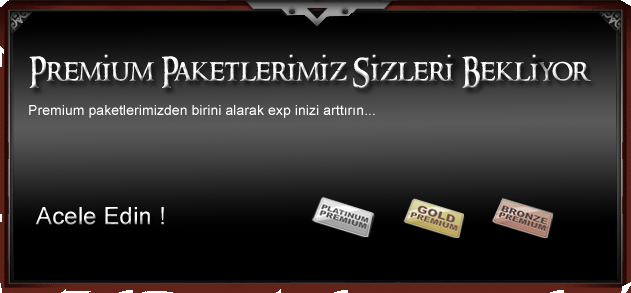
<style>
.page{position:relative;width:631px;height:293px}
.page>*{position:absolute;margin:0}
.t1{font:30px "RingbearerMedium";letter-spacing:0.005em}
.t2{font:14px "ArialMT";letter-spacing:0.005em;color:#ffffff}
.t3{font:24px "ArialMT";letter-spacing:0.005em}
</style>
<div class="page">
<p class="t1" style="left:29px;top:56px;width:562px;height:33px">Premium Paketlerimiz Sizleri Bekliyor !</p>
<p class="t2" style="left:29px;top:105px;width:346px;height:13px">Premium paketlerimizden birini alarak exp inizi arttırın...</p>
<p class="t3" style="left:36px;top:207px;width:128px;height:18px">Acele Edin !</p>
</div>
